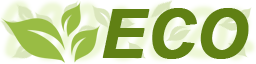
<style>
.page{position:relative;width:256px;height:64px;background:#608014}
.page>*{position:absolute;margin:0}
.t1{font:65.7px "Arial-BoldItalicMT";color:#608014;font-weight:bold}
</style>
<div class="page">
<p class="t1" style="left:102px;top:8px;width:147px;height:51px">ECO</p>
</div>
